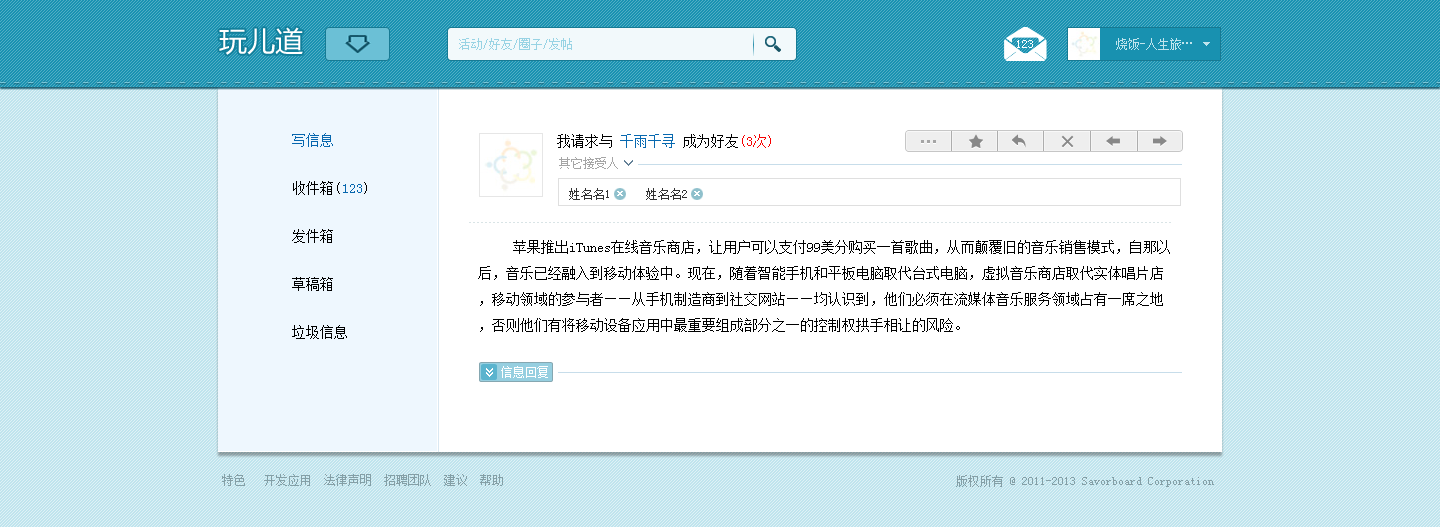
<style>
.page{position:relative;width:1440px;height:527px;background:#ffffff}
.page>*{position:absolute;margin:0}
.t1{font:28px "MicrosoftYaHei";color:#ffffff}
.t2{font:12px "SimSun";color:#98d3e4}
.t3{font:12px "SimSun";color:#ffffff}
.t4{font:14px/48px "SimSun";letter-spacing:0.01em;color:#000000}
.t5{font:14px/48px "SimSun";letter-spacing:0.01em;color:#0666ae}
.t6{font:14px "SimSun";color:#000000}
.t7{font:14px "SimSun";color:#0869b0}
.t8{font:14px "SimSun";color:#f70000}
.t9{font:12px "SimSun";color:#a5a5a5}
.t10{font:14px/26px "SimSun";color:#000000}
.t11{font:12px "SimSun";color:#849fa6}
</style>
<div class="page">
<p class="t1" style="left:219px;top:27px;width:84px;height:28px">玩儿道</p>
<p class="t2" style="left:459px;top:38px;width:113px;height:12px">活动/好友/圈子/发帖</p>
<p class="t3" style="left:1017px;top:40px;width:16px;height:8px">123</p>
<p class="t4" style="left:292px;top:133px;width:75px;height:206px"><span class="t5">写信息<br></span>收件箱(<span class="t5">123</span>)<br>发件箱<br>草稿箱<br>垃圾信息</p>
<p class="t6" style="left:557px;top:134px;width:214px;height:14px">我请求与 <span class="t7">千雨千寻 </span>成为好友<span class="t8">(3次)</span></p>
<p class="t9" style="left:559px;top:157px;width:59px;height:12px">其它接受人</p>
<p class="t10" style="left:478px;top:240px;width:692px;height:92px">苹果推出iTunes在线音乐商店，让用户可以支付99美分购买一首歌曲，从而颠覆旧的音乐销售模式，自那以后，音乐已经融入到移动体验中。现在，随着智能手机和平板电脑取代台式电脑，虚拟音乐商店取代实体唱片店，移动领域的参与者——从手机制造商到社交网站——均认识到，他们必须在流媒体音乐服务领域占有一席之地，否则他们有将移动设备应用中最重要组成部分之一的控制权拱手相让的风险。</p>
<p class="t3" style="left:501px;top:366px;width:47px;height:12px">信息回复</p>
<p class="t11" style="left:222px;top:474px;width:281px;height:12px">特色   开发应用  法律声明  招聘团队  建议  帮助</p>
<p class="t11" style="left:956px;top:475px;width:258px;height:12px">版权所有 @ 2011-2013 Savorboard Corporation</p>
</div>
